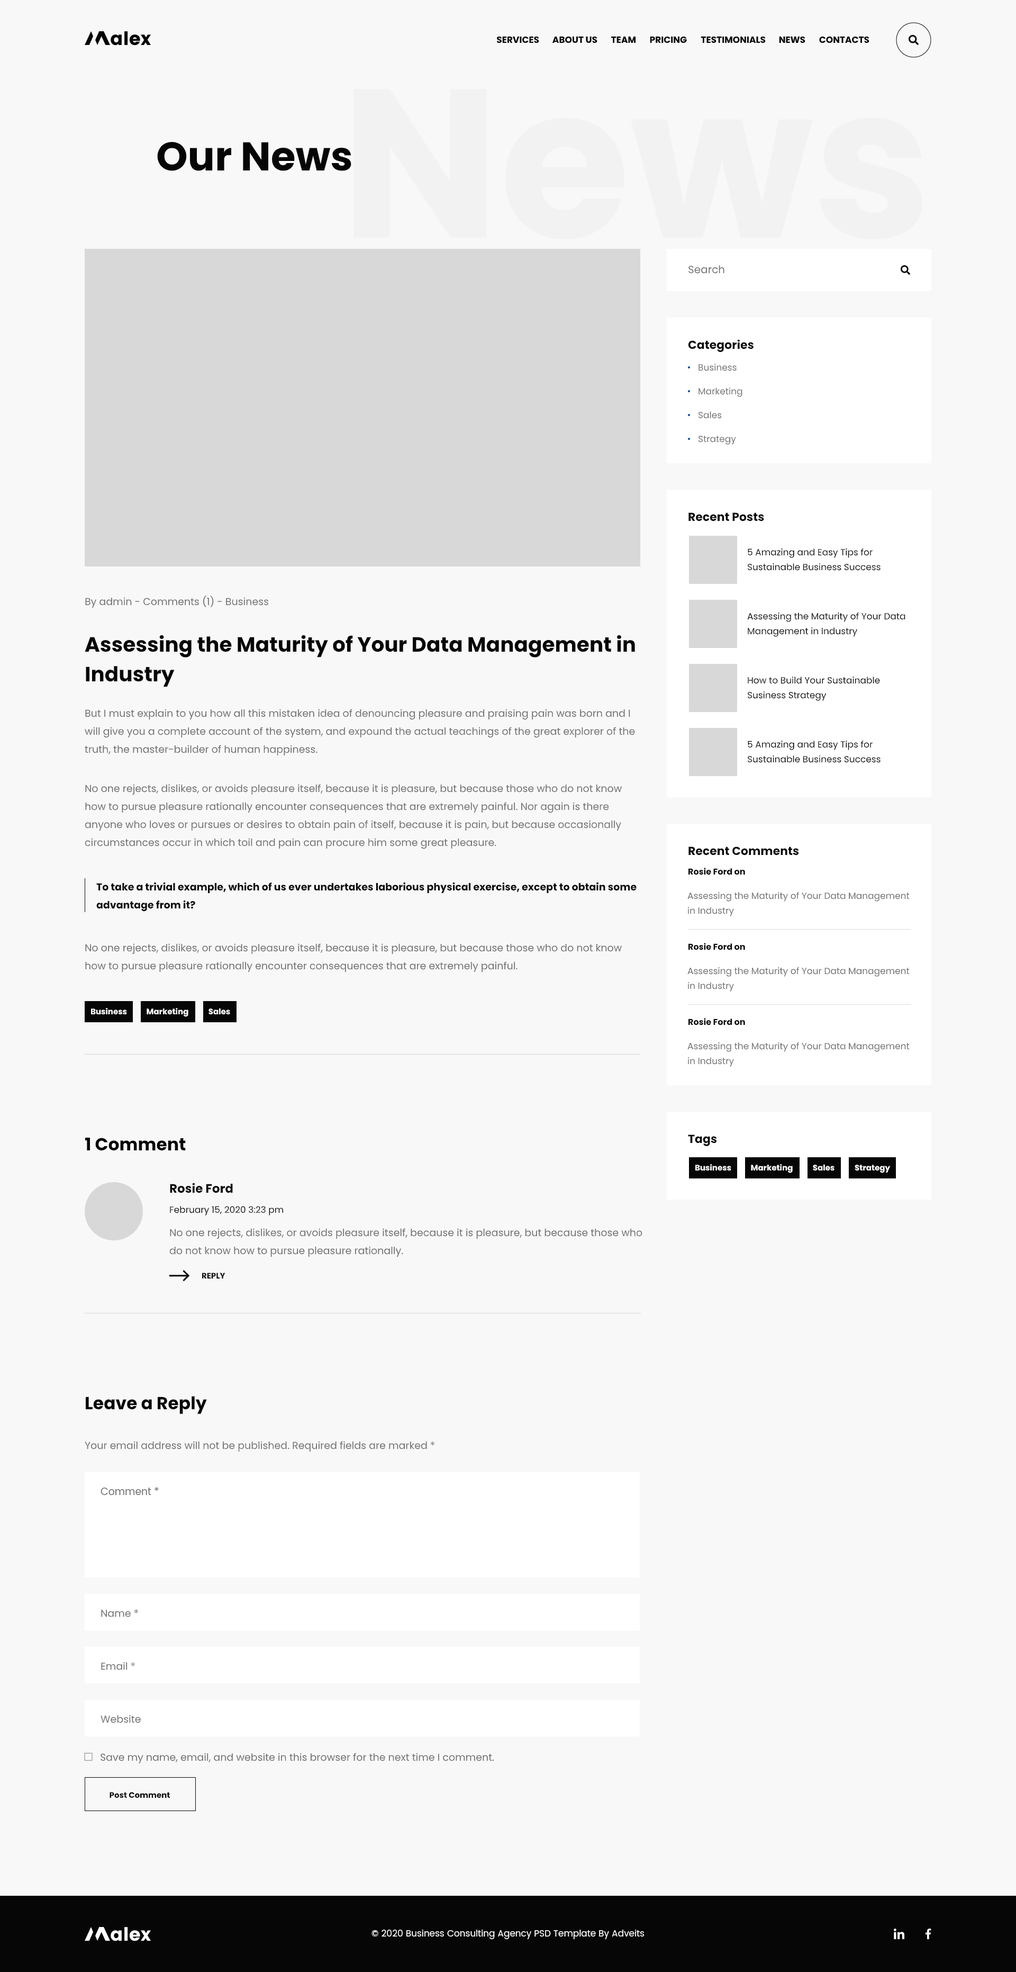
<style>
.page{position:relative;width:1016px;height:1972px;background:#f8f8f8}
.page>*{position:absolute;margin:0}
.t1{font:9px "Poppins-Bold";color:#060606}
.t2{font:211.8px "Poppins-Bold";color:#f2f2f2}
.t3{font:40.2px "Poppins-Bold";color:#060606}
.t4{font:10.6px "Poppins-Regular";color:#6c6c6c}
.t5{font:11.6px "Poppins-Bold";color:#060606}
.t6{font:9px "Poppins-Regular";color:#6c6c6c}
.t7{font:9px/14.8px "Poppins-Regular";color:#060606}
.t8{font:10.1px "Poppins-Regular";color:#6c6c6c}
.t9{font:20.6px/29.6px "Poppins-Bold";color:#060606}
.t10{font:10.1px/18px "Poppins-Regular";color:#6c6c6c}
.t11{font:8.5px "Poppins-Bold";color:#060606}
.t12{font:10.1px/18px "Poppins-Bold";color:#060606}
.t13{font:9px/14.8px "Poppins-Regular";color:#6c6c6c}
.t14{font:7.9px "Poppins-Bold";color:#ffffff}
.t15{font:17.5px "Poppins-Bold";color:#060606}
.t16{font:12.2px "Poppins-Bold";color:#060606}
.t17{font:9px "Poppins-Regular";color:#060606}
.t18{font:7.9px "Poppins-Bold";color:#060606}
.t19{font:9px "Poppins-Regular";color:#ffffff}
</style>
<div class="page">
<p class="t1" style="left:497px;top:36px;width:42px;height:7px">SERVICES</p>
<p class="t1" style="left:553px;top:37px;width:45px;height:6px">ABOUT US</p>
<p class="t1" style="left:611px;top:37px;width:25px;height:6px">TEAM</p>
<p class="t1" style="left:650px;top:37px;width:37px;height:6px">PRICING</p>
<p class="t1" style="left:701px;top:37px;width:65px;height:6px">TESTIMONIALS</p>
<p class="t1" style="left:779px;top:37px;width:27px;height:6px">NEWS</p>
<p class="t1" style="left:820px;top:37px;width:50px;height:6px">CONTACTS</p>
<p class="t2" style="left:353px;top:89px;width:570px;height:151px">News</p>
<p class="t3" style="left:157px;top:141px;width:195px;height:30px">Our News</p>
<p class="t4" style="left:689px;top:265px;width:36px;height:9px">Search</p>
<p class="t5" style="left:688px;top:339px;width:66px;height:14px">Categories</p>
<p class="t6" style="left:699px;top:364px;width:38px;height:7px">Business</p>
<p class="t6" style="left:699px;top:388px;width:44px;height:9px">Marketing</p>
<p class="t6" style="left:698px;top:411px;width:24px;height:8px">Sales</p>
<p class="t6" style="left:698px;top:435px;width:38px;height:10px">Strategy</p>
<p class="t5" style="left:689px;top:512px;width:75px;height:9px">Recent Posts</p>
<p class="t7" style="left:748px;top:548px;width:133px;height:23px">5 Amazing and Easy Tips for Sustainable Business Success</p>
<p class="t8" style="left:85px;top:596px;width:184px;height:12px">By admin - Comments (1) - Business</p>
<p class="t7" style="left:748px;top:613px;width:158px;height:24px">Assessing the Maturity of Your Data Management in Industry</p>
<p class="t9" style="left:85px;top:635px;width:550px;height:52px">Assessing the Maturity of Your Data Management in Industry</p>
<p class="t7" style="left:748px;top:677px;width:132px;height:24px">How to Build Your Sustainable Susiness Strategy</p>
<p class="t10" style="left:85px;top:709px;width:550px;height:46px">But I must explain to you how all this mistaken idea of denouncing pleasure and praising pain was born and I will give you a complete account of the system, and expound the actual teachings of the great explorer of the truth, the master-builder of human happiness.</p>
<p class="t7" style="left:748px;top:741px;width:133px;height:22px">5 Amazing and Easy Tips for Sustainable Business Success</p>
<p class="t10" style="left:85px;top:784px;width:538px;height:65px">No one rejects, dislikes, or avoids pleasure itself, because it is pleasure, but because those who do not know how to pursue pleasure rationally encounter consequences that are extremely painful. Nor again is there anyone who loves or pursues or desires to obtain pain of itself, because it is pain, but because occasionally circumstances occur in which toil and pain can procure him some great pleasure.</p>
<p class="t5" style="left:689px;top:847px;width:110px;height:9px">Recent Comments</p>
<p class="t11" style="left:688px;top:868px;width:57px;height:7px">Rosie Ford on</p>
<p class="t12" style="left:96px;top:882px;width:541px;height:30px">To take a trivial example, which of us ever undertakes laborious physical exercise, except to obtain some advantage from it?</p>
<p class="t13" style="left:688px;top:892px;width:222px;height:24px">Assessing the Maturity of Your Data Management in Industry</p>
<p class="t10" style="left:85px;top:943px;width:538px;height:29px">No one rejects, dislikes, or avoids pleasure itself, because it is pleasure, but because those who do not know how to pursue pleasure rationally encounter consequences that are extremely painful.</p>
<p class="t11" style="left:688px;top:943px;width:57px;height:7px">Rosie Ford on</p>
<p class="t13" style="left:688px;top:967px;width:222px;height:25px">Assessing the Maturity of Your Data Management in Industry</p>
<p class="t14" style="left:91px;top:1007px;width:36px;height:8px">Business</p>
<p class="t14" style="left:147px;top:1007px;width:41px;height:10px">Marketing</p>
<p class="t14" style="left:209px;top:1008px;width:21px;height:7px">Sales</p>
<p class="t11" style="left:688px;top:1018px;width:57px;height:7px">Rosie Ford on</p>
<p class="t13" style="left:688px;top:1042px;width:222px;height:25px">Assessing the Maturity of Your Data Management in Industry</p>
<p class="t15" style="left:85px;top:1137px;width:101px;height:14px">1 Comment</p>
<p class="t5" style="left:688px;top:1135px;width:29px;height:12px">Tags</p>
<p class="t14" style="left:695px;top:1164px;width:37px;height:7px">Business</p>
<p class="t14" style="left:751px;top:1164px;width:42px;height:9px">Marketing</p>
<p class="t14" style="left:813px;top:1164px;width:22px;height:7px">Sales</p>
<p class="t14" style="left:855px;top:1165px;width:35px;height:8px">Strategy</p>
<p class="t16" style="left:170px;top:1183px;width:63px;height:10px">Rosie Ford</p>
<p class="t17" style="left:170px;top:1206px;width:113px;height:10px">February 15, 2020 3:23 pm</p>
<p class="t10" style="left:169px;top:1228px;width:474px;height:29px">No one rejects, dislikes, or avoids pleasure itself, because it is pleasure, but because those who do not know how to pursue pleasure rationally.</p>
<p class="t18" style="left:202px;top:1273px;width:24px;height:6px">REPLY</p>
<p class="t15" style="left:86px;top:1396px;width:121px;height:18px">Leave a Reply</p>
<p class="t8" style="left:85px;top:1441px;width:350px;height:11px">Your email address will not be published. Required fields are marked *</p>
<p class="t8" style="left:101px;top:1487px;width:58px;height:8px">Comment *</p>
<p class="t8" style="left:101px;top:1609px;width:37px;height:8px">Name *</p>
<p class="t8" style="left:101px;top:1662px;width:34px;height:8px">Email *</p>
<p class="t8" style="left:101px;top:1715px;width:40px;height:8px">Website</p>
<p class="t8" style="left:101px;top:1753px;width:393px;height:10px">Save my name, email, and website in this browser for the next time I comment.</p>
<p class="t18" style="left:110px;top:1792px;width:60px;height:6px">Post Comment</p>
<p class="t19" style="left:372px;top:1930px;width:273px;height:9px">© 2020 Business Consulting Agency PSD Template By Adveits</p>
</div>
